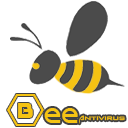
<style>
.page{position:relative;width:128px;height:128px;background:#ffffff}
.page>*{position:absolute;margin:0}
.t1{font:36px "D3-Honeycombism";color:#f5c313}
.t2{font:24px "Spaz-1";color:#f5c313}
.t3{font:10.9px "Backslash";color:#f5c313;scale:0.82 1}
</style>
<div class="page">
<p class="t1" style="left:7px;top:94px;width:37px;height:32px">B</p>
<p class="t2" style="left:44px;top:108px;width:34px;height:15px">ee</p>
<p class="t3" style="left:79px;top:115px;width:46px;height:9px">Antivirus</p>
</div>
